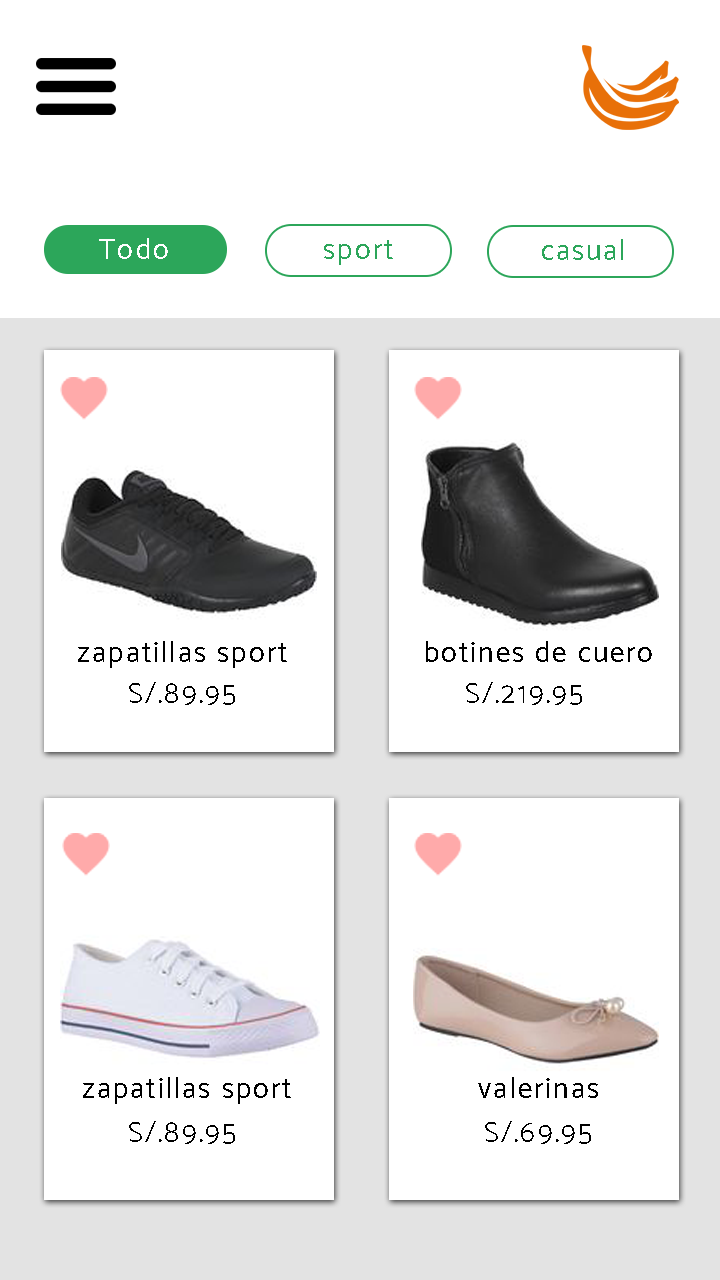
<style>
.page{position:relative;width:720px;height:1280px;background:#ffffff}
.page>*{position:absolute;margin:0}
.t1{font:29.2px "Catamaran-Regular";letter-spacing:0.075em;color:#ffffff}
.t2{font:29.2px "Catamaran-Regular";letter-spacing:0.075em;color:#2ca65a}
.t3{font:29.2px "Catamaran-Regular";letter-spacing:0.075em;color:#000000}
.t4{font:29.2px "Catamaran-Light";letter-spacing:0.075em;color:#000000}
</style>
<div class="page">
<p class="t1" style="left:99px;top:238px;width:69px;height:21px">Todo</p>
<p class="t2" style="left:324px;top:240px;width:69px;height:25px">sport</p>
<p class="t2" style="left:542px;top:239px;width:81px;height:21px">casual</p>
<p class="t3" style="left:78px;top:641px;width:209px;height:27px">zapatillas sport</p>
<p class="t3" style="left:426px;top:641px;width:226px;height:21px">botines de cuero</p>
<p class="t4" style="left:129px;top:682px;width:106px;height:23px">S/.89.95</p>
<p class="t4" style="left:466px;top:682px;width:116px;height:23px">S/.219.95</p>
<p class="t3" style="left:83px;top:1077px;width:208px;height:27px">zapatillas sport</p>
<p class="t3" style="left:478px;top:1077px;width:120px;height:21px">valerinas</p>
<p class="t4" style="left:129px;top:1121px;width:106px;height:23px">S/.89.95</p>
<p class="t4" style="left:485px;top:1121px;width:106px;height:23px">S/.69.95</p>
</div>
